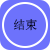
<style>
.page{position:relative;width:50px;height:50px;background:#6d72fc}
.page>*{position:absolute;margin:0}
.t1{font:12px "NSimSun";color:#000000}
</style>
<div class="page">
<p class="t1" style="left:14px;top:19px;width:23px;height:12px">结束</p>
</div>
